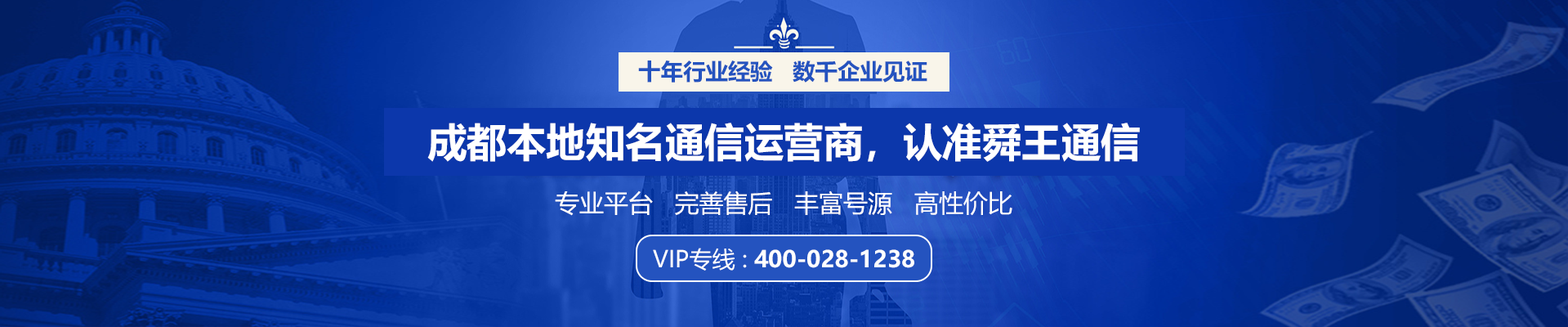
<style>
.page{position:relative;width:1568px;height:327px}
.page>*{position:absolute;margin:0}
.t1{font:22.4px "MicrosoftYaHei-Bold";color:#2453bf;text-transform:uppercase}
.t2{font:39.6px "MicrosoftYaHei-Bold";color:#ffffff;text-transform:uppercase}
.t3{font:24.5px "MicrosoftYaHei";color:#ffffff;text-transform:uppercase}
.t4{font:22.9px "MicrosoftYaHei-Bold";color:#ffffff;text-transform:uppercase}
.t5{font:22.9px "MicrosoftYaHei";color:#ffffff;text-transform:uppercase}
</style>
<div class="page">
<p class="t1" style="left:638px;top:60px;width:289px;height:23px">十年行业经验   数千企业见证</p>
<p class="t2" style="left:427px;top:123px;width:713px;height:39px">成都本地知名通信运营商，认准舜王通信</p>
<p class="t3" style="left:555px;top:190px;width:457px;height:26px">专业平台   完善售后   丰富号源   高性价比</p>
<p class="t4" style="left:653px;top:248px;width:261px;height:22px"><span class="t5">VIP专线 : </span>400-028-1238</p>
</div>
